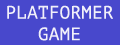
<style>
.page{position:relative;width:120px;height:45px;background:#4848cc}
.page>*{position:absolute;margin:0}
.t1{font:18px "PTMono-Regular";color:#f1f0f9}
</style>
<div class="page">
<p class="t1" style="left:7px;top:5px;width:106px;height:36px;text-align:center">PLATFORMER GAME</p>
</div>
